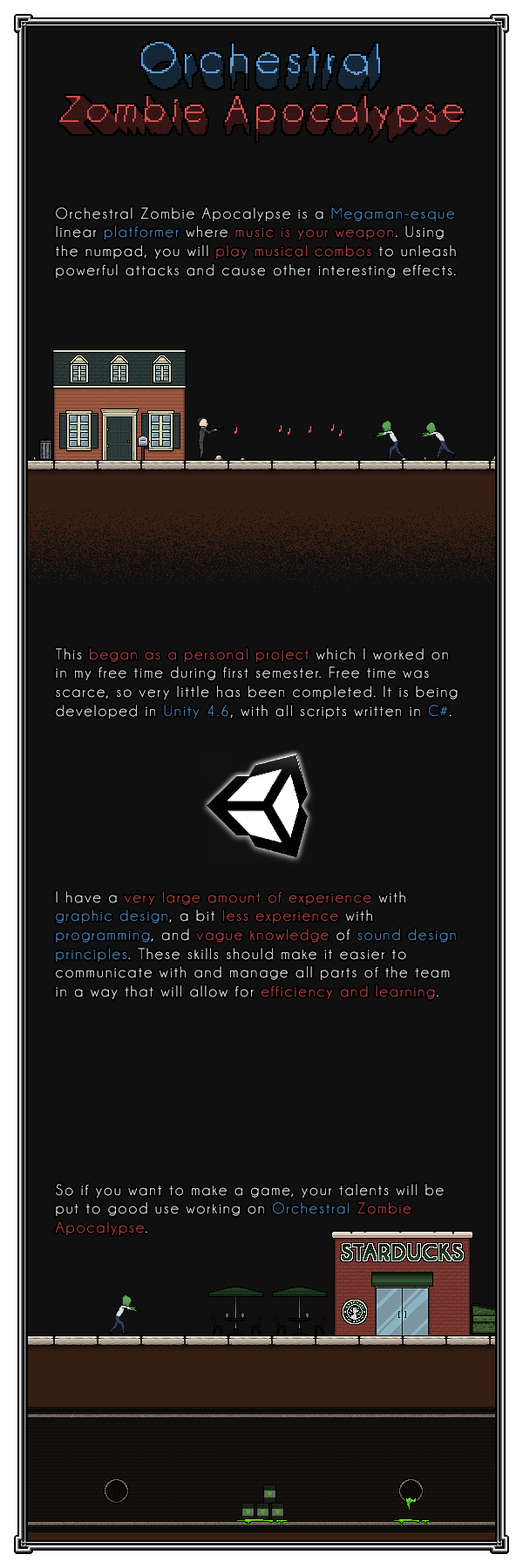
<style>
.page{position:relative;width:523px;height:1568px;background:#101010}
.page>*{position:absolute;margin:0}
.t1{font:15.7px "Champagne&Limousines";letter-spacing:0.12em;color:#ffffff}
.t2{font:15.7px "Champagne&Limousines";letter-spacing:0.12em;color:#569cd7}
.t3{font:15.7px "Champagne&Limousines";letter-spacing:0.12em;color:#cd4e4e}
.t4{font:15.7px "Champagne&Limousines";letter-spacing:0.12em;color:#559bd7}
.t5{font:15.7px "Champagne&Limousines";letter-spacing:0.12em;color:#569cd8}
</style>
<div class="page">
<p class="t1" style="left:56px;top:207px;width:400px;height:71px">Orchestral Zombie Apocalypse is a <span class="t2">Megaman-esque </span>linear <span class="t2">platformer</span> where <span class="t3">music is your weapon</span>. Using the numpad, you will <span class="t3">play musical combos</span> to unleash powerful attacks and cause other interesting effects.</p>
<p class="t1" style="left:56px;top:648px;width:401px;height:71px">This <span class="t3">began as a personal project</span> which I worked on in my free time during first semester. Free time was scarce, so very little has been completed. It is being developed in <span class="t4">Unity 4.6</span>, with all scripts written in <span class="t4">C#</span>.</p>
<p class="t1" style="left:56px;top:891px;width:400px;height:108px">I have a <span class="t3">very large amount of experience</span> with <span class="t5">graphic design</span>, a bit <span class="t3">less experience</span> with <span class="t5">programming</span>, and <span class="t3">vague knowledge</span> of <span class="t5">sound design principles</span>. These skills should make it easier to communicate with and manage all parts of the team in a way that will allow for <span class="t3">efficiency and learning</span>.</p>
<p class="t1" style="left:55px;top:1184px;width:388px;height:51px">So if you want to make a game, your talents will be put to good use working on <span class="t5">Orchestral </span><span class="t3">Zombie Apocalypse</span>.</p>
</div>
